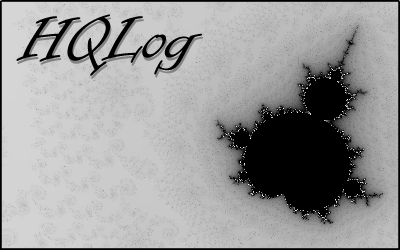
<style>
.page{position:relative;width:400px;height:250px}
.page>*{position:absolute;margin:0}
.t1{font:72px "InformalRoman-Regular";color:#000000}
.t2{font:72px "InformalRoman-Regular"}
</style>
<div class="page">
<p class="t1" style="left:16px;top:14px;width:186px;height:62px">HQLog</p>
<p class="t2" style="left:17px;top:17px;width:186px;height:62px">HQLog</p>
</div>
